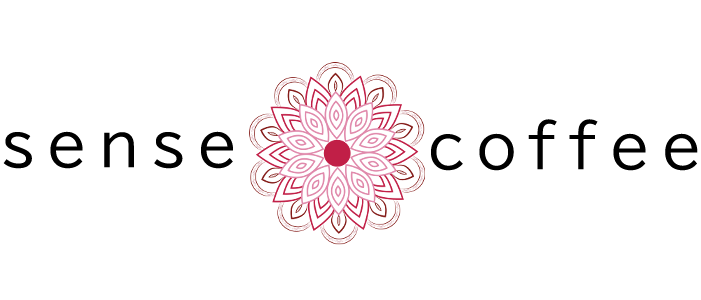
<style>
.page{position:relative;width:701px;height:300px;background:#ffffff}
.page>*{position:absolute;margin:0}
.t1{font:58.3px "BIZ-UDPGothic";letter-spacing:0.2em;color:#000000}
</style>
<div class="page">
<p class="t1" style="left:431px;top:119px;width:267px;height:52px">coffee</p>
<p class="t1" style="left:3px;top:131px;width:230px;height:38px">sense</p>
</div>
